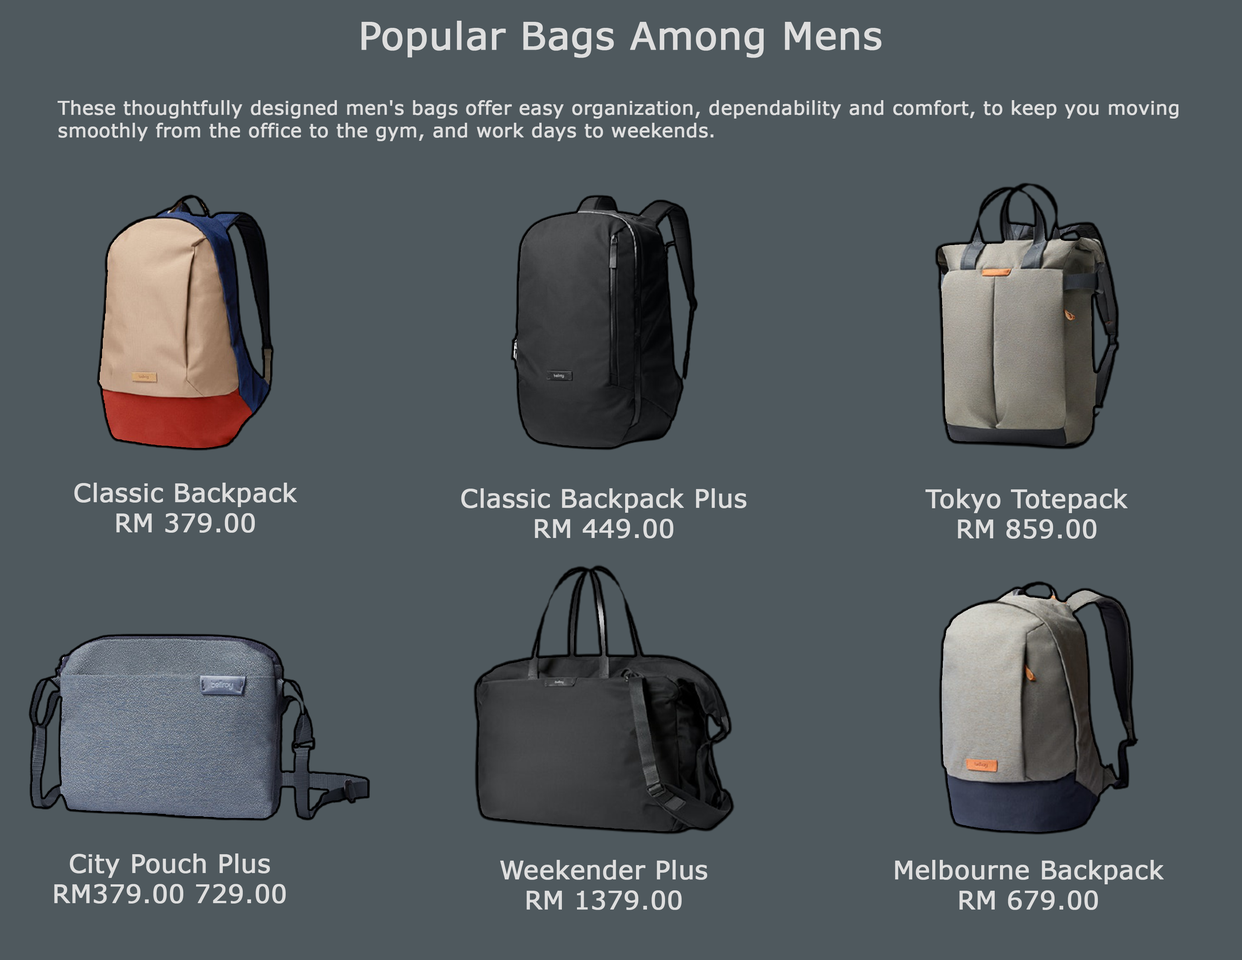
<style>
.page{position:relative;width:1242px;height:960px;background:#4f595e}
.page>*{position:absolute;margin:0}
.t1{font:37.6px "Verdana";color:#dedede;font-weight:bold}
.t2{font:18.8px "Verdana";color:#dedede;font-weight:bold}
.t3{font:25.1px "Verdana";color:#dedede;font-weight:bold}
</style>
<div class="page">
<p class="t1" style="left:361px;top:21px;width:521px;height:37px">Popular Bags Among Mens</p>
<p class="t2" style="left:58px;top:100px;width:1121px;height:41px">These thoughtfully designed men's bags offer easy organization, dependability and comfort, to keep you moving <br>smoothly from the office to the gym, and work days to weekends.</p>
<p class="t3" style="left:74px;top:483px;width:223px;height:50px;text-align:center">Classic Backpack<br>RM 379.00</p>
<p class="t3" style="left:461px;top:488px;width:285px;height:50px;text-align:center">Classic Backpack Plus<br>RM 449.00</p>
<p class="t3" style="left:926px;top:489px;width:202px;height:50px;text-align:center">Tokyo Totepack<br>RM 859.00</p>
<p class="t3" style="left:54px;top:853px;width:232px;height:50px;text-align:center">City Pouch Plus<br>RM379.00 729.00</p>
<p class="t3" style="left:500px;top:860px;width:207px;height:50px;text-align:center">Weekender Plus<br>RM 1379.00</p>
<p class="t3" style="left:895px;top:860px;width:269px;height:50px;text-align:center">Melbourne Backpack<br>RM 679.00</p>
</div>
